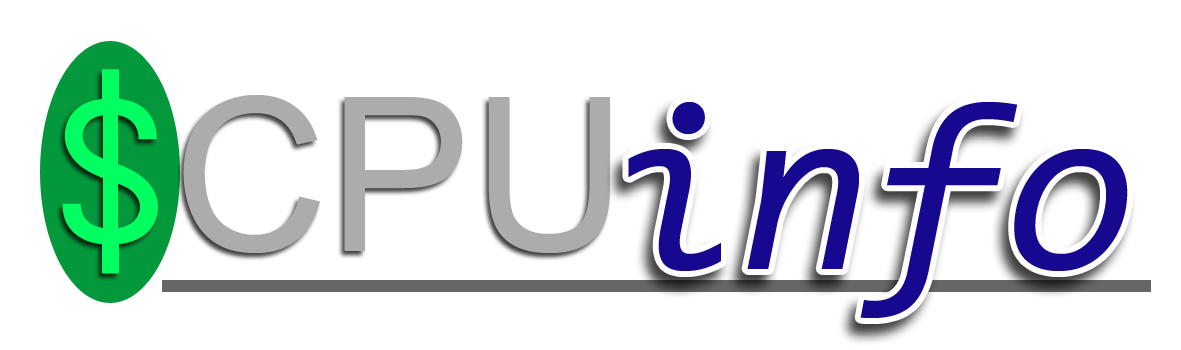
<style>
.page{position:relative;width:1181px;height:350px;background:#ffffff}
.page>*{position:absolute;margin:0}
.t1{font:215px "Adwaita-Mono";color:#01ff61}
.t2{font:215px "ArialMT";color:#acacac}
.t3{font:240px "Consolas-Italic";color:#160990}
</style>
<div class="page">
<p class="t1" style="left:62px;top:69px;width:96px;height:205px">$</p>
<p class="t2" style="left:183px;top:95px;width:427px;height:158px">CPU</p>
<p class="t3" style="left:628px;top:102px;width:500px;height:216px">info</p>
</div>
